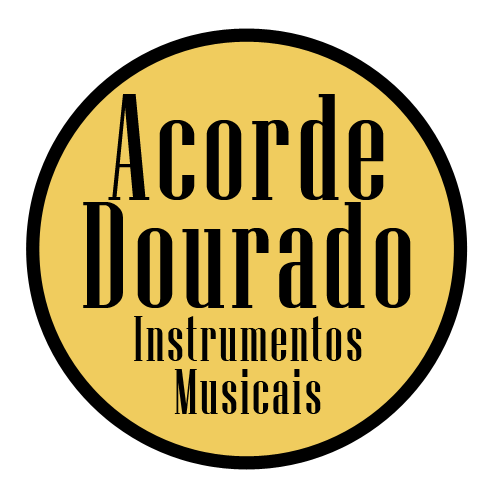
<style>
.page{position:relative;width:500px;height:500px;background:#f0cc5e}
.page>*{position:absolute;margin:0}
.t1{font:64.1px/53.1px "NiagaraSolid-Reg";letter-spacing:0.04em;color:#000000}
.t2{font:151.6px/107.3px "NiagaraSolid-Reg";letter-spacing:0.04em;color:#000000}
</style>
<div class="page">
<p class="t1" style="left:83px;top:94px;width:328px;height:320px;text-align:center"><span class="t2">Acorde<br>Dourado<br></span>Instrumentos<br>Musicais</p>
</div>
